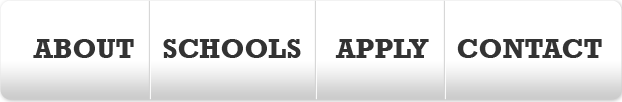
<style>
.page{position:relative;width:622px;height:102px;background:#ffffff}
.page>*{position:absolute;margin:0}
.t1{font:28px "Rockwell-Bold";color:#333333}
</style>
<div class="page">
<p class="t1" style="left:33px;top:39px;width:569px;height:19px">ABOUT    SCHOOLS     APPLY    CONTACT</p>
</div>
